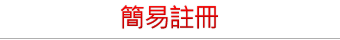
<style>
.page{position:relative;width:340px;height:40px;background:#ffffff}
.page>*{position:absolute;margin:0}
.t1{font:26px "MicrosoftJhengHeiRegular";letter-spacing:-0.05em}
</style>
<div class="page">
<p class="t1" style="left:121px;top:5px;width:97px;height:24px">簡易註冊</p>
</div>
